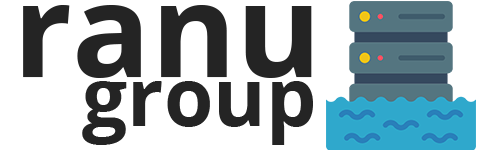
<style>
.page{position:relative;width:500px;height:150px;background:#ffffff}
.page>*{position:absolute;margin:0}
.t1{font:130px "OpenSans-Bold";color:#242424}
.t2{font:80px "OpenSans-Bold";color:#242424}
</style>
<div class="page">
<p class="t1" style="left:23px;top:5px;width:289px;height:73px">ranu</p>
<p class="t2" style="left:82px;top:81px;width:231px;height:64px">group</p>
</div>
